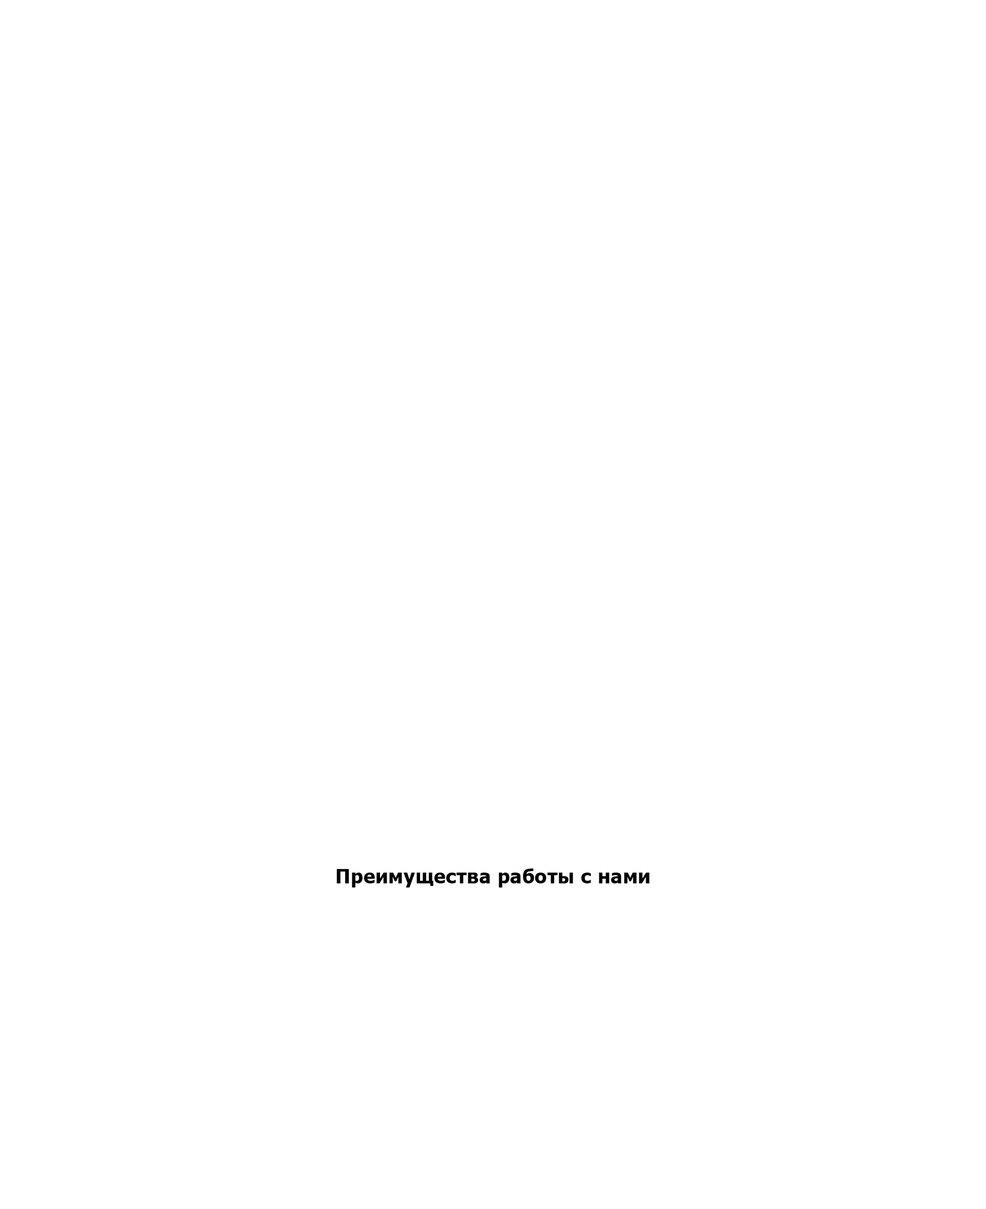
<style>
.page{position:relative;width:986px;height:1209px;background:#ffffff}
.page>*{position:absolute;margin:0}
.t1{font:19.5px "Tahoma-Bold";letter-spacing:0.02em;color:#030303}
</style>
<div class="page">
<p class="t1" style="left:336px;top:869px;width:314px;height:19px">Преимущества работы с нами</p>
</div>
